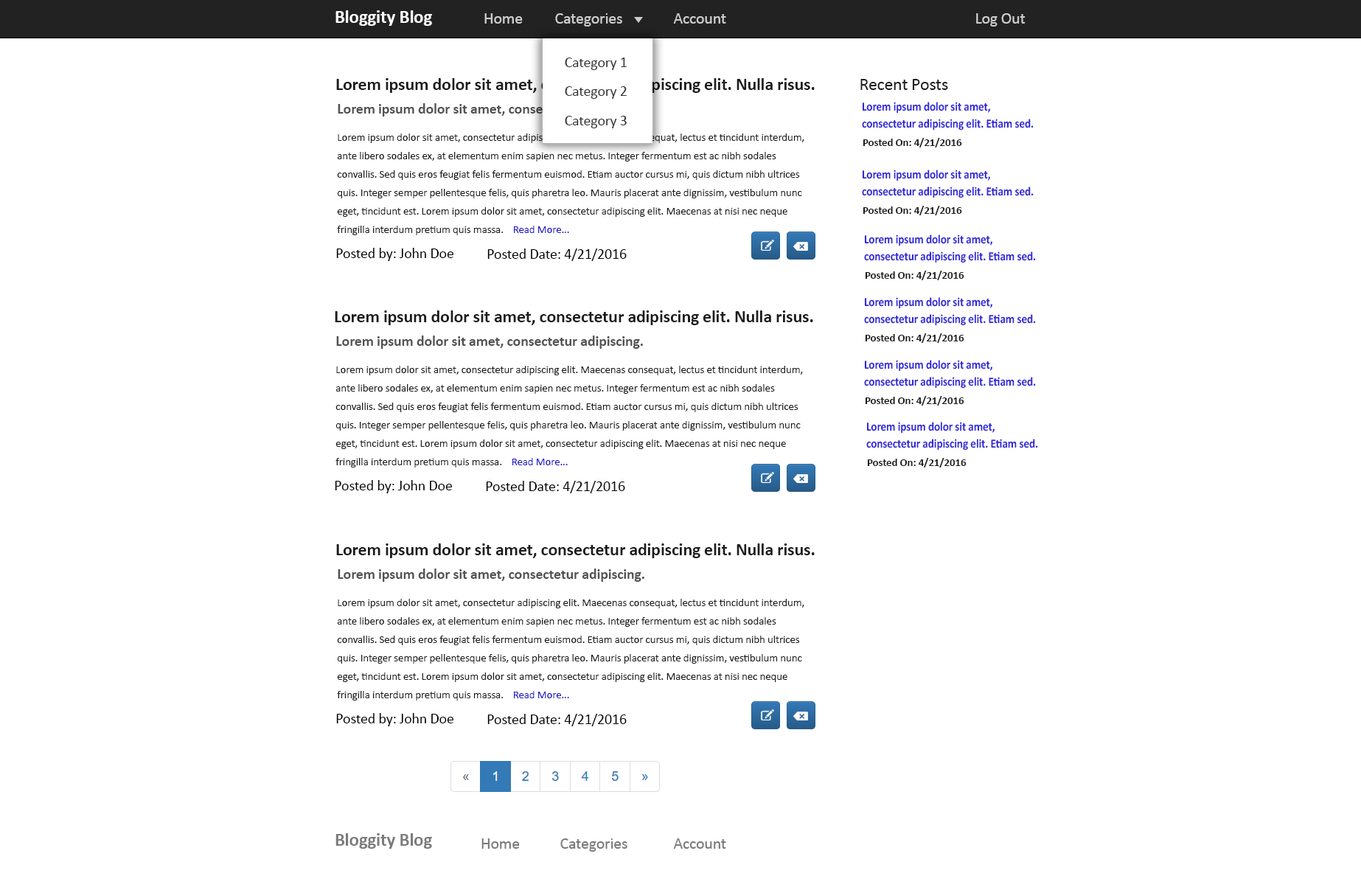
<style>
.page{position:relative;width:1361px;height:876px;background:#ffffff}
.page>*{position:absolute;margin:0}
.t1{font:18.4px "Calibri-Bold";letter-spacing:-0.01em;color:#ffffff}
.t2{font:16.2px "Calibri";letter-spacing:-0.01em;color:#cccccc}
.t3{font:14.7px "Calibri";letter-spacing:-0.01em;color:#333333}
.t4{font:17.7px "Calibri-Bold";letter-spacing:-0.01em;color:#1c1c1c}
.t5{font:17.7px "Calibri";letter-spacing:-0.01em;color:#1e1e1f}
.t6{font:12.5px/16.7px "Calibri-Bold";letter-spacing:-0.01em;color:#3129d8;scale:0.9 1}
.t7{font:12.5px/16.7px "Calibri";letter-spacing:-0.01em;color:#3129d8;scale:0.9 1}
.t8{font:14.7px "Calibri-Bold";letter-spacing:-0.01em;color:#535252}
.t9{font:11.1px/18.4px "Calibri";letter-spacing:-0.01em;color:#1c1c1c}
.t10{font:11.1px "Calibri-Bold";letter-spacing:-0.01em;color:#1e1e1f}
.t11{font:11.1px "Calibri";letter-spacing:-0.01em;color:#221ac7}
.t12{font:14.7px "Calibri";letter-spacing:-0.01em;color:#040404}
.t13{font:18.4px "Calibri-Bold";letter-spacing:-0.01em;color:#7d7c7c}
.t14{font:16.2px "Calibri";letter-spacing:-0.01em;color:#7d7c7c}
</style>
<div class="page">
<p class="t1" style="left:336px;top:10px;width:96px;height:16px">Bloggity Blog</p>
<p class="t2" style="left:484px;top:13px;width:39px;height:11px">Home</p>
<p class="t2" style="left:555px;top:13px;width:67px;height:14px">Categories</p>
<p class="t2" style="left:673px;top:13px;width:53px;height:11px">Account</p>
<p class="t2" style="left:976px;top:13px;width:50px;height:14px">Log Out</p>
<p class="t3" style="left:565px;top:58px;width:62px;height:12px">Category 1</p>
<p class="t4" style="left:336px;top:78px;width:479px;height:15px">Lorem ipsum dolor sit amet, consectetur adipiscing elit. Nulla risus.</p>
<p class="t3" style="left:565px;top:86px;width:62px;height:13px">Category 2</p>
<p class="t5" style="left:861px;top:79px;width:87px;height:11px">Recent Posts</p>
<p class="t6" style="left:862px;top:102px;width:172px;height:29px"><span class="t7"><br><br></span>Lorem ipsum dolor sit amet, consectetur adipiscing elit. Etiam sed.</p>
<p class="t8" style="left:338px;top:103px;width:306px;height:14px">Lorem ipsum dolor sit amet, consectetur adipiscing.</p>
<p class="t3" style="left:565px;top:116px;width:62px;height:12px">Category 3</p>
<p class="t9" style="left:337px;top:133px;width:467px;height:102px">Lorem ipsum dolor sit amet, consectetur adipiscing elit. Maecenas consequat, lectus et tincidunt interdum, ante libero sodales ex, at elementum enim sapien nec metus. Integer fermentum est ac nibh sodales convallis. Sed quis eros feugiat felis fermentum euismod. Etiam auctor cursus mi, quis dictum nibh ultrices quis. Integer semper pellentesque felis, quis pharetra leo. Mauris placerat ante dignissim, vestibulum nunc eget, tincidunt est. Lorem ipsum dolor sit amet, consectetur adipiscing elit. Maecenas at nisi nec neque fringilla interdum pretium quis massa.</p>
<p class="t10" style="left:863px;top:138px;width:99px;height:9px">Posted On: 4/21/2016</p>
<p class="t6" style="left:862px;top:170px;width:172px;height:28px"><span class="t7"><br><br></span>Lorem ipsum dolor sit amet, consectetur adipiscing elit. Etiam sed.</p>
<p class="t10" style="left:863px;top:206px;width:99px;height:9px">Posted On: 4/21/2016</p>
<p class="t11" style="left:514px;top:226px;width:55px;height:7px">Read More...</p>
<p class="t6" style="left:864px;top:234px;width:172px;height:29px"><span class="t7"><br><br></span>Lorem ipsum dolor sit amet, consectetur adipiscing elit. Etiam sed.</p>
<p class="t12" style="left:336px;top:248px;width:117px;height:13px">Posted by: John Doe</p>
<p class="t12" style="left:487px;top:248px;width:140px;height:13px">Posted Date: 4/21/2016</p>
<p class="t10" style="left:865px;top:271px;width:99px;height:9px">Posted On: 4/21/2016</p>
<p class="t6" style="left:864px;top:297px;width:172px;height:29px"><span class="t7"><br><br></span>Lorem ipsum dolor sit amet, consectetur adipiscing elit. Etiam sed.</p>
<p class="t4" style="left:335px;top:310px;width:478px;height:15px">Lorem ipsum dolor sit amet, consectetur adipiscing elit. Nulla risus.</p>
<p class="t8" style="left:336px;top:336px;width:307px;height:13px">Lorem ipsum dolor sit amet, consectetur adipiscing.</p>
<p class="t10" style="left:865px;top:333px;width:99px;height:10px">Posted On: 4/21/2016</p>
<p class="t9" style="left:336px;top:366px;width:467px;height:102px">Lorem ipsum dolor sit amet, consectetur adipiscing elit. Maecenas consequat, lectus et tincidunt interdum, ante libero sodales ex, at elementum enim sapien nec metus. Integer fermentum est ac nibh sodales convallis. Sed quis eros feugiat felis fermentum euismod. Etiam auctor cursus mi, quis dictum nibh ultrices quis. Integer semper pellentesque felis, quis pharetra leo. Mauris placerat ante dignissim, vestibulum nunc eget, tincidunt est. Lorem ipsum dolor sit amet, consectetur adipiscing elit. Maecenas at nisi nec neque fringilla interdum pretium quis massa.</p>
<p class="t6" style="left:864px;top:360px;width:172px;height:29px"><span class="t7"><br><br></span>Lorem ipsum dolor sit amet, consectetur adipiscing elit. Etiam sed.</p>
<p class="t10" style="left:865px;top:396px;width:99px;height:10px">Posted On: 4/21/2016</p>
<p class="t6" style="left:866px;top:422px;width:172px;height:29px"><span class="t7"><br><br></span>Lorem ipsum dolor sit amet, consectetur adipiscing elit. Etiam sed.</p>
<p class="t11" style="left:512px;top:458px;width:56px;height:7px">Read More...</p>
<p class="t10" style="left:867px;top:458px;width:100px;height:10px">Posted On: 4/21/2016</p>
<p class="t12" style="left:335px;top:480px;width:117px;height:13px">Posted by: John Doe</p>
<p class="t12" style="left:486px;top:481px;width:139px;height:12px">Posted Date: 4/21/2016</p>
<p class="t4" style="left:336px;top:543px;width:479px;height:15px">Lorem ipsum dolor sit amet, consectetur adipiscing elit. Nulla risus.</p>
<p class="t8" style="left:338px;top:569px;width:306px;height:13px">Lorem ipsum dolor sit amet, consectetur adipiscing.</p>
<p class="t9" style="left:337px;top:599px;width:467px;height:102px">Lorem ipsum dolor sit amet, consectetur adipiscing elit. Maecenas consequat, lectus et tincidunt interdum, ante libero sodales ex, at elementum enim sapien nec metus. Integer fermentum est ac nibh sodales convallis. Sed quis eros feugiat felis fermentum euismod. Etiam auctor cursus mi, quis dictum nibh ultrices quis. Integer semper pellentesque felis, quis pharetra leo. Mauris placerat ante dignissim, vestibulum nunc eget, tincidunt est. Lorem ipsum dolor sit amet, consectetur adipiscing elit. Maecenas at nisi nec neque fringilla interdum pretium quis massa.</p>
<p class="t11" style="left:514px;top:691px;width:55px;height:7px">Read More...</p>
<p class="t12" style="left:336px;top:713px;width:117px;height:13px">Posted by: John Doe</p>
<p class="t12" style="left:487px;top:714px;width:140px;height:12px">Posted Date: 4/21/2016</p>
<p class="t13" style="left:336px;top:833px;width:96px;height:16px">Bloggity Blog</p>
<p class="t14" style="left:482px;top:838px;width:38px;height:11px">Home</p>
<p class="t14" style="left:560px;top:838px;width:68px;height:14px">Categories</p>
<p class="t14" style="left:673px;top:838px;width:53px;height:11px">Account</p>
</div>
